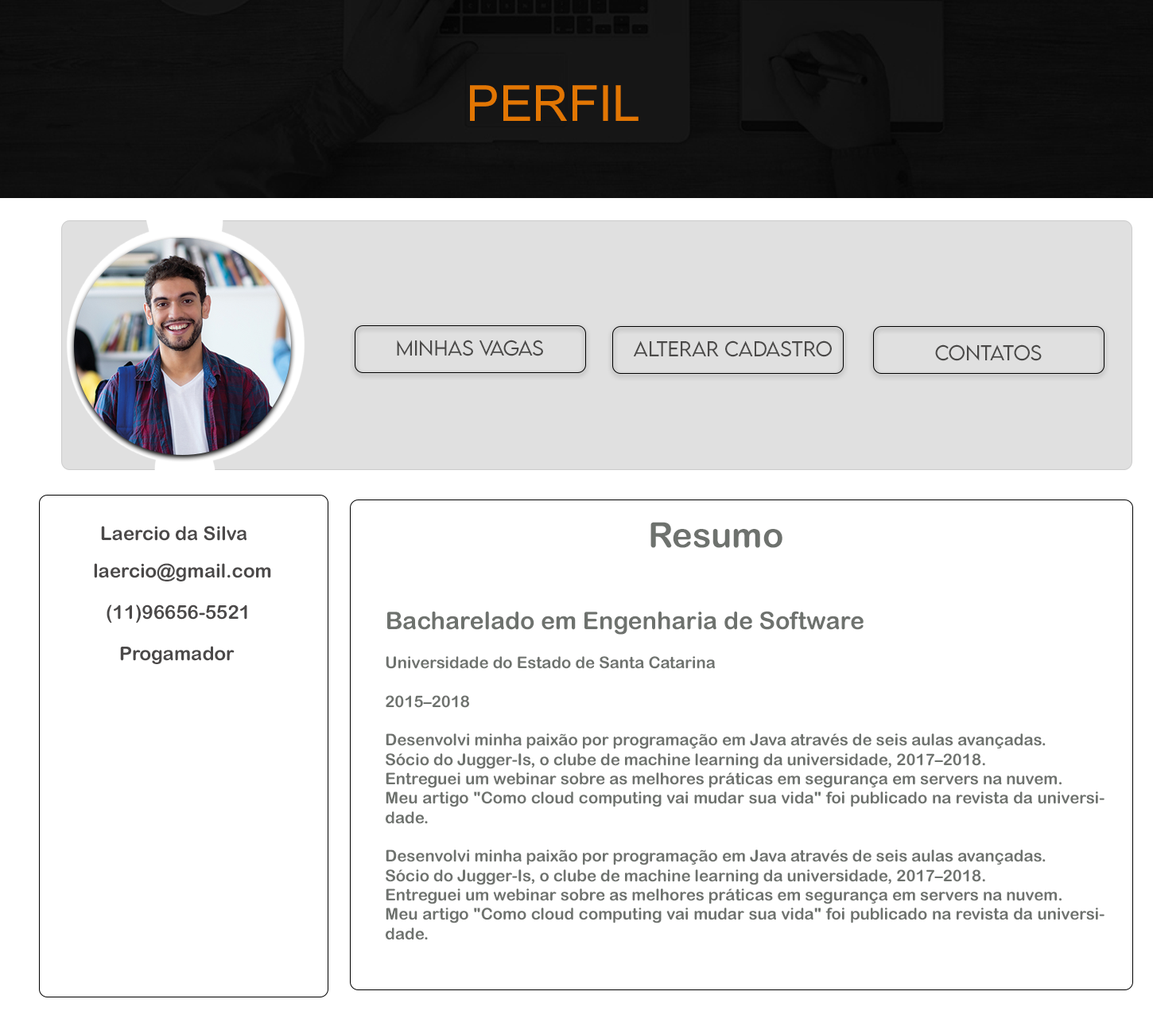
<style>
.page{position:relative;width:1153px;height:1034px;background:#ffffff}
.page>*{position:absolute;margin:0}
.t1{font:49.7px "ArialMT";color:#e27603}
.t2{font:19.1px "LEMONMILK-Light";color:#4a4948}
.t3{font:34.6px "ArialRoundedMTBold";color:#6e726e}
.t4{font:19.1px "ArialRoundedMTBold";color:#4b4949}
.t5{font:16.1px "ArialRoundedMTBold";color:#6e726e}
.t6{font:24.2px "ArialRoundedMTBold";color:#6e726e}
</style>
<div class="page">
<p class="t1" style="left:470px;top:85px;width:169px;height:36px">PERFIL</p>
<p class="t2" style="left:397px;top:340px;width:146px;height:16px">minhas vagas</p>
<p class="t2" style="left:633px;top:340px;width:199px;height:17px">alterar cadastro</p>
<p class="t2" style="left:935px;top:344px;width:107px;height:17px">contatos</p>
<p class="t3" style="left:651px;top:522px;width:132px;height:26px">Resumo</p>
<p class="t4" style="left:101px;top:526px;width:146px;height:15px">Laercio da Silva</p>
<p class="t4" style="left:94px;top:563px;width:177px;height:18px">laercio@gmail.com</p>
<p class="t4" style="left:107px;top:604px;width:140px;height:19px">(11)96656-5521</p>
<p class="t5" style="left:386px;top:611px;width:719px;height:329px;text-align:justify"><span class="t6">Bacharelado em Engenharia de Software<br></span><br>Universidade do Estado de Santa Catarina<br><br>2015–2018<br><br>Desenvolvi minha paixão por programação em Java através de seis aulas avançadas.<br>Sócio do Jugger-Is, o clube de machine learning da universidade, 2017–2018.<br>Entreguei um webinar sobre as melhores práticas em segurança em servers na nuvem.<br>Meu artigo "Como cloud computing vai mudar sua vida" foi publicado na revista da universidade.<br><br>Desenvolvi minha paixão por programação em Java através de seis aulas avançadas.<br>Sócio do Jugger-Is, o clube de machine learning da universidade, 2017–2018.<br>Entreguei um webinar sobre as melhores práticas em segurança em servers na nuvem.<br>Meu artigo "Como cloud computing vai mudar sua vida" foi publicado na revista da universidade.</p>
<p class="t4" style="left:120px;top:646px;width:115px;height:18px">Progamador</p>
</div>
